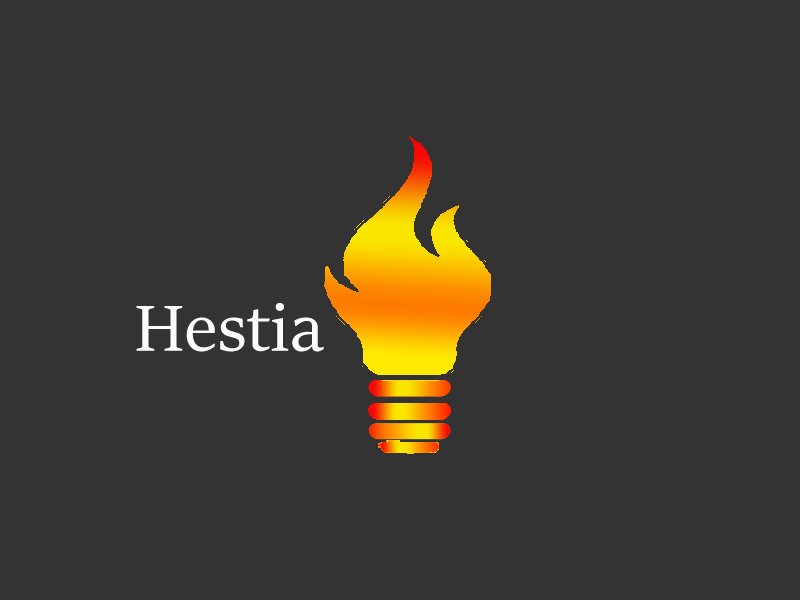
<style>
.page{position:relative;width:800px;height:600px;background:#333333}
.page>*{position:absolute;margin:0}
.t1{font:72px "SitkaHeading";color:#fffbfb}
</style>
<div class="page">
<p class="t1" style="left:136px;top:303px;width:188px;height:49px">Hestia</p>
</div>
